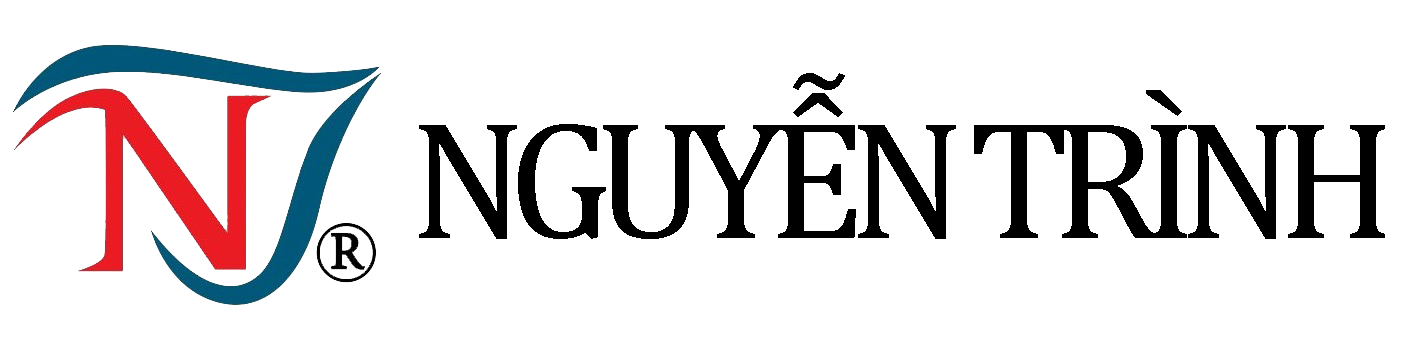
<style>
.page{position:relative;width:1420px;height:350px;background:#ffffff}
.page>*{position:absolute;margin:0}
.t1{font:170px "Cambria";letter-spacing:-0.1em;color:#000000}
</style>
<div class="page">
<p class="t1" style="left:419px;top:73px;width:966px;height:166px">NGUYỄN TRÌNH</p>
</div>
